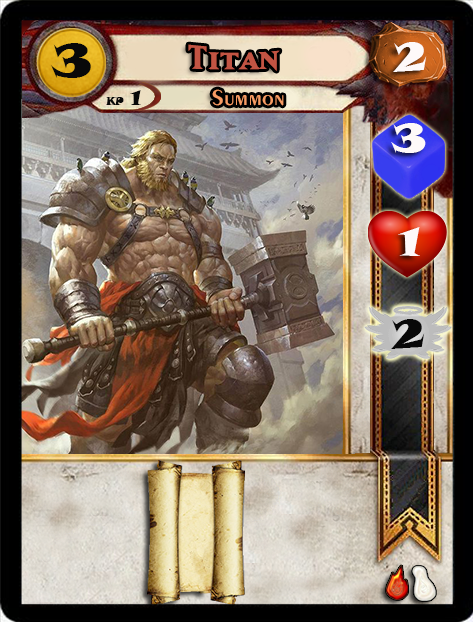
<style>
.page{position:relative;width:473px;height:622px}
.page>*{position:absolute;margin:0}
.t1{font:46.6px "SnapITC-Regular";color:#090909;scale:1.05 1}
.t2{font:40px "MatrixBoldSmallCaps";color:#c25443;scale:1.06 1}
.t3{font:40px "SnapITC-Regular";color:#fef9f9;scale:1.05 1}
.t4{font:22.7px "Exotic350BT-DemiBold";color:#f89c64;scale:1.06 1}
.t5{font:20.5px "SnapITC-Regular";color:#090909}
.t6{font:40px "SnapITC-Regular";color:#090909;scale:1.05 1}
</style>
<div class="page">
<p class="t1" style="left:51px;top:43px;width:40px;height:35px">3</p>
<p class="t2" style="left:188px;top:44px;width:92px;height:27px">Titan</p>
<p class="t3" style="left:393px;top:42px;width:34px;height:30px">2</p>
<p class="t4" style="left:212px;top:89px;width:72px;height:17px">Summon</p>
<p class="t5" style="left:130px;top:90px;width:11px;height:15px">1</p>
<p class="t3" style="left:391px;top:123px;width:35px;height:30px">3</p>
<p class="t3" style="left:398px;top:227px;width:22px;height:29px">1</p>
<p class="t6" style="left:391px;top:319px;width:34px;height:30px">2</p>
</div>
